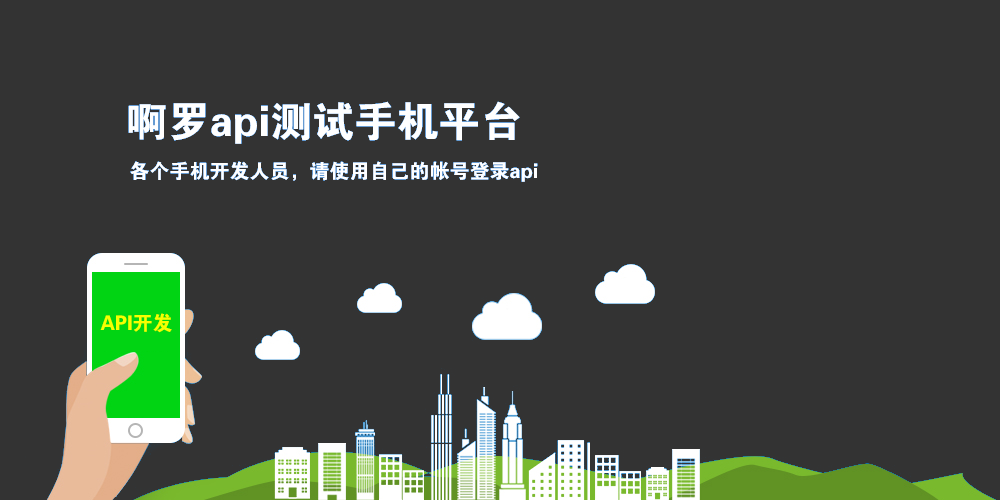
<style>
.page{position:relative;width:1000px;height:500px;background:#333333}
.page>*{position:absolute;margin:0}
.t1{font:42px "FZDHTK--GBK1-0";color:#ffffff}
.t2{font:20px "FZDHTK--GBK1-0";color:#ffffff}
.t3{font:20px "FZDHTK--GBK1-0";color:#f6ff00}
</style>
<div class="page">
<p class="t1" style="left:128px;top:101px;width:392px;height:43px">啊罗api测试手机平台</p>
<p class="t2" style="left:130px;top:161px;width:408px;height:21px">各个手机开发人员，请使用自己的帐号登录api</p>
<p class="t3" style="left:100px;top:313px;width:72px;height:20px">API开发</p>
</div>
